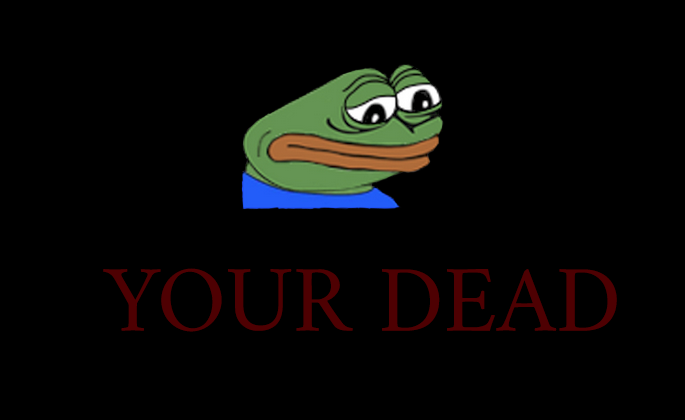
<style>
.page{position:relative;width:685px;height:420px;background:#000000}
.page>*{position:absolute;margin:0}
.t1{font:95px "Amiri-Regular";color:#4e0002}
</style>
<div class="page">
<p class="t1" style="left:103px;top:268px;width:514px;height:64px">YOUR DEAD</p>
</div>
